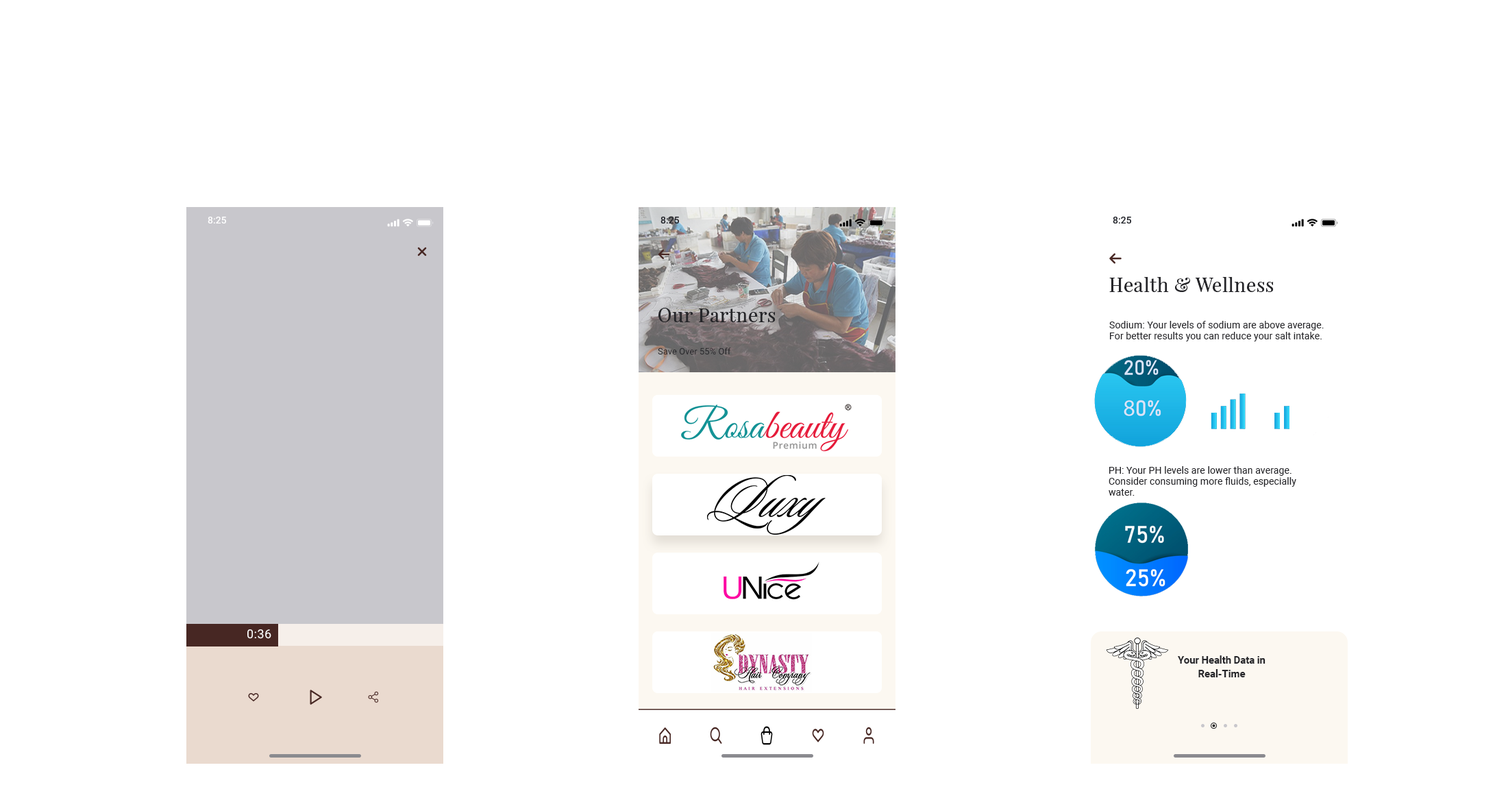
<style>
.page{position:relative;width:1495px;height:798px;background:#ffffff}
.page>*{position:absolute;margin:0}
.t1{font:9.6px "SFProText-Medium";color:#ffffff}
.t2{font:9.6px "SFProText-Medium";color:#22242a}
.t3{font:19.2px "PlayfairDisplay-Regular";letter-spacing:0.027em;color:#252529}
.t4{font:9.6px/11px "Roboto-Regular";letter-spacing:0.008em;color:#252529}
.t5{font:8.9px "Roboto-Regular";letter-spacing:0.002em;color:#252529}
.t6{font:12.3px "Roboto-Regular";letter-spacing:0.028em;color:#ffffff}
.t7{font:10.3px/13.7px "Roboto-Bold";letter-spacing:-0.007em;color:#252529}
</style>
<div class="page">
<p class="t1" style="left:208px;top:217px;width:18px;height:6px">8:25</p>
<p class="t2" style="left:661px;top:217px;width:18px;height:6px">8:25</p>
<p class="t2" style="left:1113px;top:217px;width:18px;height:6px">8:25</p>
<p class="t3" style="left:1109px;top:277px;width:165px;height:15px">Health &amp; Wellness</p>
<p class="t3" style="left:658px;top:308px;width:118px;height:14px">Our Partners</p>
<p class="t4" style="left:1109px;top:321px;width:215px;height:20px">Sodium: Your levels of sodium are above average. <br>For better results you can reduce your salt intake.</p>
<p class="t5" style="left:658px;top:347px;width:73px;height:8px">Save Over 55% Off</p>
<p class="t4" style="left:1109px;top:466px;width:187px;height:29px">PH: Your PH levels are lower than average.<br>Consider consuming more fluids, especially<br>water.</p>
<p class="t6" style="left:247px;top:629px;width:24px;height:10px">0:36</p>
<p class="t7" style="left:1178px;top:655px;width:88px;height:22px;text-align:center">Your Health Data in Real-Time</p>
</div>
